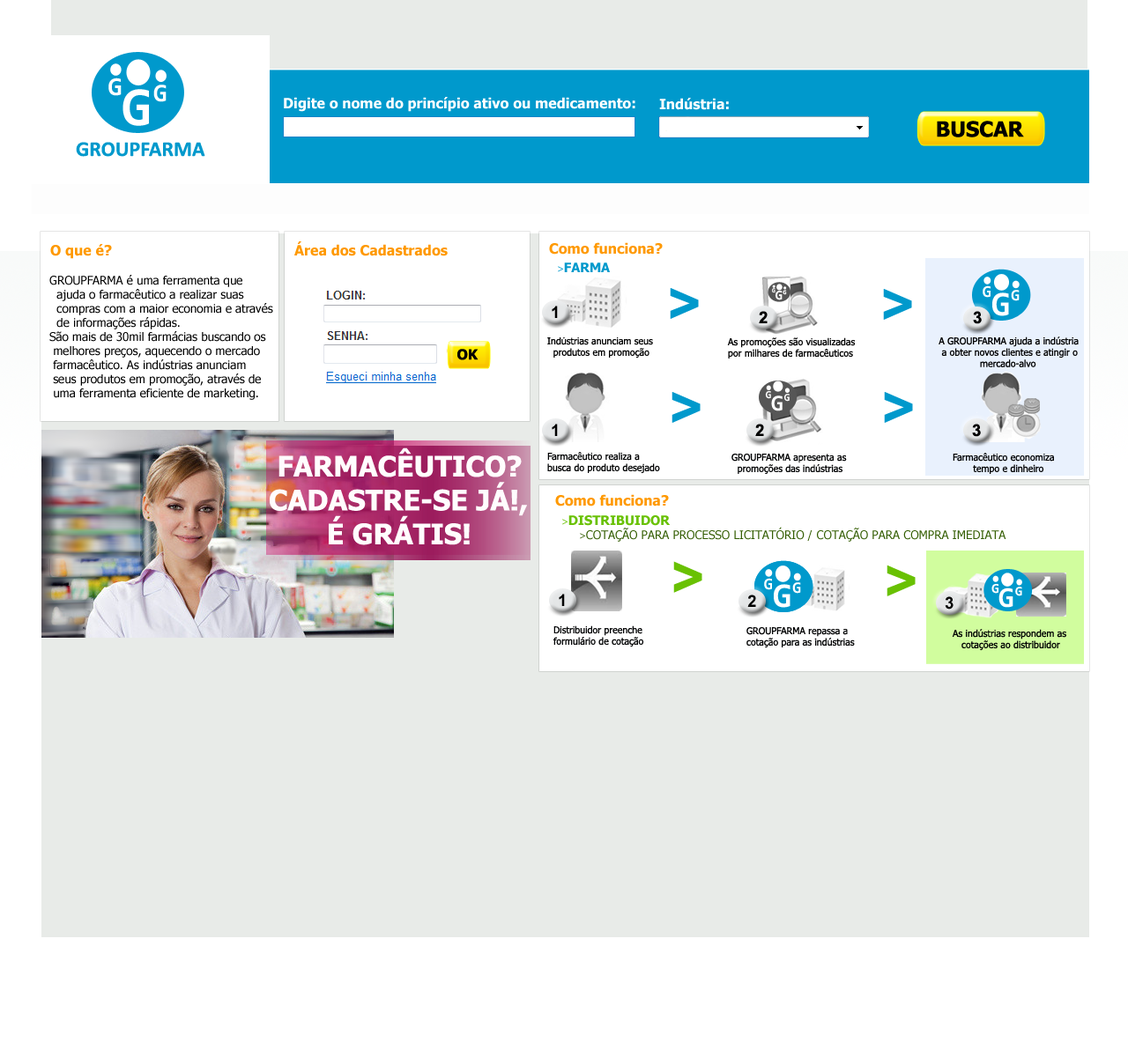
<style>
.page{position:relative;width:1128px;height:1057px;background:#ffffff}
.page>*{position:absolute;margin:0}
.t1{font:26.1px "Consolas-Bold";color:#ffffff}
.t2{font:55.1px "Consolas-Bold";color:#ffffff}
.t3{font:25.5px "Consolas-Bold";color:#ffffff}
.t4{font:14.1px "Tahoma-Bold";color:#ffffff}
.t5{font:21.1px "Tahoma-Bold";color:#000000}
.t6{font:21.1px "Calibri-Bold";color:#0099cc}
.t7{font:14.1px "Tahoma-Bold";color:#ff9900}
.t8{font:12.9px "Tahoma-Bold";color:#0099cc}
.t9{font:9.4px "Tahoma";color:#0099cc}
.t10{font:11.7px "Tahoma";color:#000000}
.t11{font:56.4px "Arial-BoldMT";color:#0099cc}
.t12{font:6.4px "Consolas-Bold";color:#ffffff}
.t13{font:13.4px "Consolas-Bold";color:#ffffff}
.t14{font:6.2px "Consolas-Bold";color:#ffffff}
.t15{font:16.5px "Consolas-Bold";color:#ffffff}
.t16{font:34.9px "Consolas-Bold";color:#ffffff}
.t17{font:16.1px "Consolas-Bold";color:#ffffff}
.t18{font:16.4px "Arial-BoldMT";color:#000000}
.t19{font:9.4px "Tahoma";color:#000000}
.t20{font:14.1px "Tahoma-Bold";color:#000000}
.t21{font:10.8px "Consolas-Bold";color:#ffffff}
.t22{font:22.7px "Consolas-Bold";color:#ffffff}
.t23{font:10.5px "Consolas-Bold";color:#ffffff}
.t24{font:28.2px "Tahoma-Bold";color:#fffcfd}
.t25{font:9.4px "Tahoma";color:#000102}
.t26{font:12.9px "Tahoma-Bold";color:#69c103}
.t27{font:9.4px "Tahoma";color:#69c103}
.t28{font:11.7px "Tahoma";color:#345e03}
.t29{font:9.4px "Tahoma";color:#345e03}
.t30{font:56.4px "Arial-BoldMT";color:#69c103}
.t31{font:13.6px "Consolas-Bold";color:#ffffff}
.t32{font:28.8px "Consolas-Bold";color:#ffffff}
.t33{font:13.3px "Consolas-Bold";color:#ffffff}
</style>
<div class="page">
<p class="t1" style="left:108px;top:78px;width:14px;height:18px">G</p>
<p class="t2" style="left:122px;top:89px;width:27px;height:37px">G</p>
<p class="t3" style="left:153px;top:85px;width:14px;height:17px">G</p>
<p class="t4" style="left:284px;top:97px;width:351px;height:15px">Digite o nome do princípio ativo ou medicamento:</p>
<p class="t4" style="left:659px;top:98px;width:70px;height:12px">Indústria:</p>
<p class="t5" style="left:937px;top:121px;width:87px;height:16px">BUSCAR</p>
<p class="t6" style="left:76px;top:142px;width:129px;height:15px">GROUPFARMA</p>
<p class="t7" style="left:50px;top:244px;width:62px;height:15px">O que é?</p>
<p class="t7" style="left:294px;top:241px;width:154px;height:15px">Área dos Cadastrados</p>
<p class="t7" style="left:549px;top:242px;width:114px;height:13px">Como funciona?</p>
<p class="t8" style="left:558px;top:263px;width:52px;height:9px"><span class="t9">&gt;</span>FARMA</p>
<p class="t10" style="left:49px;top:275px;width:224px;height:125px">GROUPFARMA é uma ferramenta que <br>  ajuda o farmacêutico a realizar suas<br>  compras com a maior economia e através <br>  de informações rápidas.<br>São mais de 30mil farmácias buscando os<br> melhores preços, aquecendo o mercado<br> farmacêutico. As indústrias anunciam<br> seus produtos em promoção, através de<br> uma ferramenta eficiente de marketing.</p>
<p class="t11" style="left:670px;top:288px;width:29px;height:31px">&gt;</p>
<p class="t12" style="left:772px;top:288px;width:3px;height:5px">G</p>
<p class="t13" style="left:774px;top:291px;width:8px;height:9px">G</p>
<p class="t14" style="left:782px;top:290px;width:5px;height:5px">G</p>
<p class="t11" style="left:883px;top:289px;width:29px;height:31px">&gt;</p>
<p class="t15" style="left:982px;top:285px;width:8px;height:13px">G</p>
<p class="t16" style="left:992px;top:293px;width:17px;height:23px">G</p>
<p class="t17" style="left:1011px;top:290px;width:8px;height:11px">G</p>
<p class="t18" style="left:552px;top:306px;width:6px;height:12px">1</p>
<p class="t18" style="left:759px;top:311px;width:8px;height:12px">2</p>
<p class="t18" style="left:973px;top:311px;width:9px;height:13px">3</p>
<p class="t19" style="left:547px;top:337px;width:106px;height:22px">Indústrias anunciam seus<br>  produtos em promoção</p>
<p class="t19" style="left:727px;top:337px;width:128px;height:22px">As promoções são visualizadas<br>por milhares de farmacêuticos</p>
<p class="t19" style="left:938px;top:337px;width:140px;height:30px">A GROUPFARMA ajuda a indústria <br>  a obter novos clientes e atingir o <br>               mercado-alvo</p>
<p class="t20" style="left:457px;top:349px;width:21px;height:11px">OK</p>
<p class="t11" style="left:671px;top:392px;width:29px;height:31px">&gt;</p>
<p class="t21" style="left:765px;top:390px;width:6px;height:9px">G</p>
<p class="t22" style="left:771px;top:396px;width:11px;height:15px">G</p>
<p class="t23" style="left:783px;top:394px;width:6px;height:8px">G</p>
<p class="t11" style="left:884px;top:392px;width:29px;height:31px">&gt;</p>
<p class="t18" style="left:552px;top:424px;width:6px;height:12px">1</p>
<p class="t18" style="left:755px;top:424px;width:9px;height:12px">2</p>
<p class="t18" style="left:972px;top:424px;width:9px;height:13px">3</p>
<p class="t24" style="left:270px;top:448px;width:257px;height:97px">FARMACÊUTICO?  <br>CADASTRE-SE JÁ!, <br>       É GRÁTIS!</p>
<p class="t25" style="left:547px;top:452px;width:113px;height:22px">Farmacêutico realiza a<br>busca do produto desejado</p>
<p class="t25" style="left:731px;top:454px;width:116px;height:21px">GROUPFARMA apresenta as<br>     promoções das indústrias</p>
<p class="t25" style="left:952px;top:453px;width:102px;height:21px">Farmacêutico economiza<br>       tempo e dinheiro</p>
<p class="t7" style="left:555px;top:494px;width:114px;height:13px">Como funciona?</p>
<p class="t26" style="left:562px;top:515px;width:109px;height:11px"><span class="t27">&gt;</span>DISTRIBUIDOR</p>
<p class="t28" style="left:580px;top:527px;width:426px;height:15px"><span class="t29">&gt;</span>COTAÇÃO PARA PROCESSO LICITATÓRIO / COTAÇÃO PARA COMPRA IMEDIATA</p>
<p class="t30" style="left:673px;top:561px;width:29px;height:32px">&gt;</p>
<p class="t30" style="left:886px;top:565px;width:29px;height:31px">&gt;</p>
<p class="t15" style="left:764px;top:578px;width:8px;height:12px">G</p>
<p class="t15" style="left:764px;top:578px;width:8px;height:12px">G</p>
<p class="t18" style="left:559px;top:594px;width:6px;height:12px">1</p>
<p class="t16" style="left:774px;top:584px;width:16px;height:24px">G</p>
<p class="t16" style="left:774px;top:584px;width:16px;height:24px">G</p>
<p class="t17" style="left:792px;top:582px;width:9px;height:12px">G</p>
<p class="t17" style="left:792px;top:582px;width:9px;height:12px">G</p>
<p class="t31" style="left:991px;top:583px;width:8px;height:11px">G</p>
<p class="t32" style="left:998px;top:588px;width:15px;height:20px">G</p>
<p class="t33" style="left:1015px;top:587px;width:7px;height:9px">G</p>
<p class="t18" style="left:747px;top:595px;width:9px;height:12px">2</p>
<p class="t18" style="left:945px;top:596px;width:8px;height:14px">3</p>
<p class="t25" style="left:553px;top:626px;width:91px;height:22px">Distribuidor preenche<br>formulário de cotação</p>
<p class="t25" style="left:746px;top:627px;width:109px;height:21px">GROUPFARMA repassa a<br>cotação para as indústrias</p>
<p class="t25" style="left:952px;top:629px;width:114px;height:22px">As indústrias respondem as <br>   cotações ao distribuidor</p>
</div>
